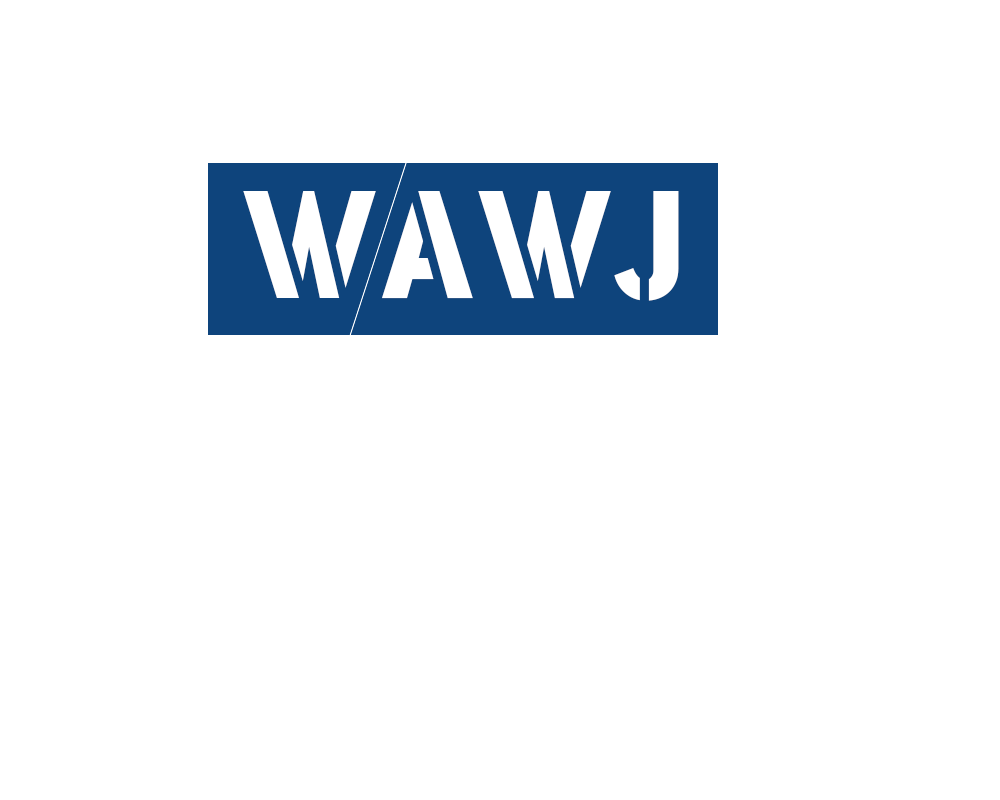
<style>
.page{position:relative;width:1000px;height:800px;background:#ffffff}
.page>*{position:absolute;margin:0}
.t1{font:150px "FLAMANTESTEN";color:#ffffff}
</style>
<div class="page">
<p class="t1" style="left:243px;top:191px;width:436px;height:110px">WAWJ</p>
</div>
